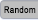
<style>
.page{position:relative;width:38px;height:20px;background:#bfbfbf}
.page>*{position:absolute;margin:0}
.t1{font:9px "ArialMT";color:#000000;font-weight:bold;scale:0.9 1}
</style>
<div class="page">
<p class="t1" style="left:4px;top:6px;width:32px;height:7px">Random</p>
</div>
